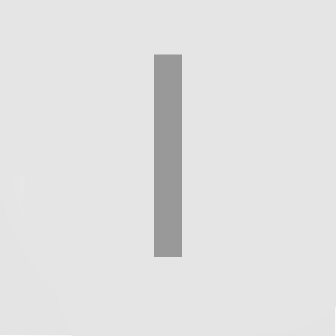
<style>
.page{position:relative;width:336px;height:336px;background:#e5e5e5}
.page>*{position:absolute;margin:0}
.t1{font:270px "Andes-Bold";letter-spacing:0.025em;color:#999999}
</style>
<div class="page">
<p class="t1" style="left:154px;top:54px;width:28px;height:203px">i</p>
</div>
